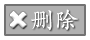
<style>
.page{position:relative;width:90px;height:40px;background:#ffffff}
.page>*{position:absolute;margin:0}
.t1{font:24px "AdobeKaitiStd-Regular";color:#ffffff}
</style>
<div class="page">
<p class="t1" style="left:31px;top:9px;width:47px;height:22px">删除</p>
</div>
